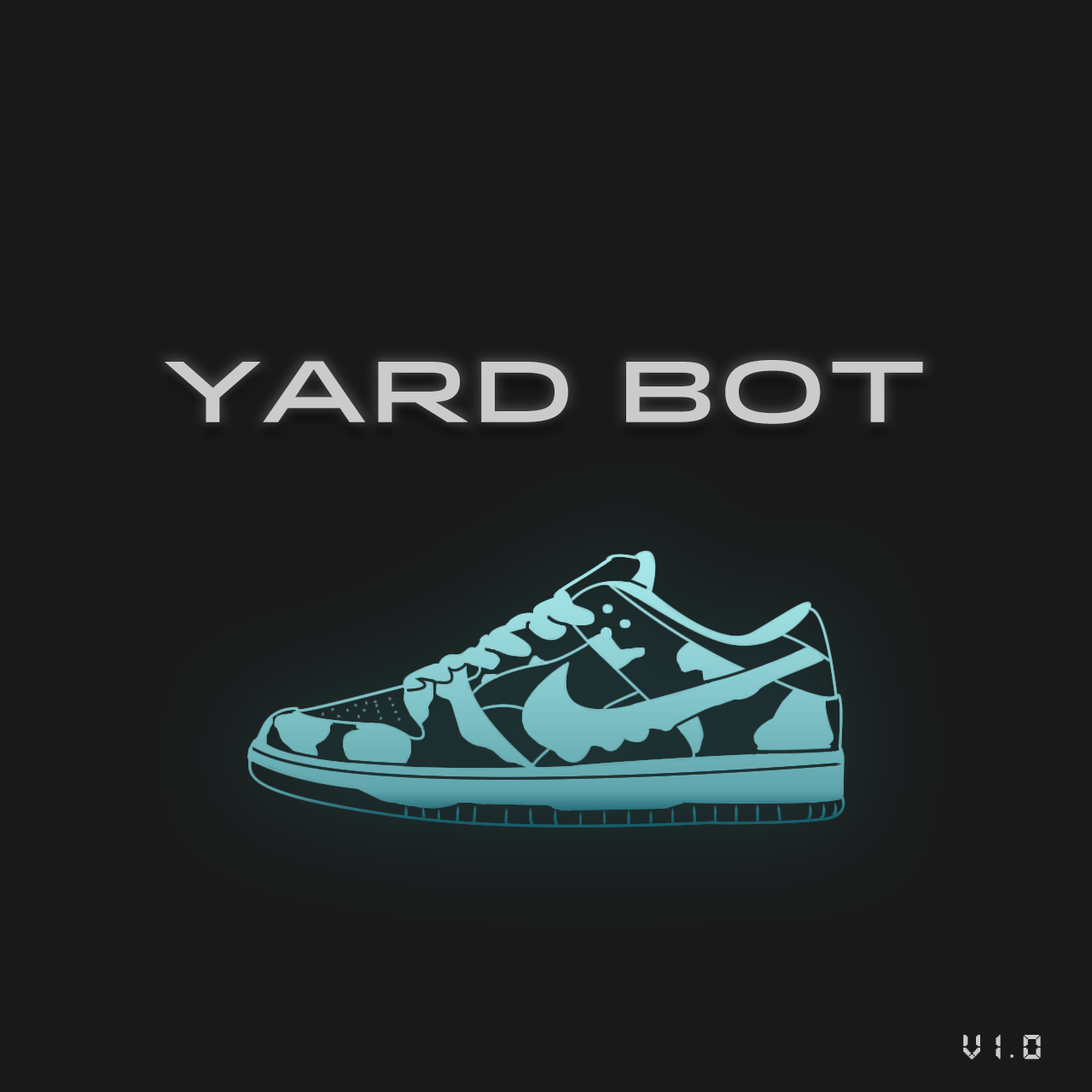
<style>
.page{position:relative;width:1092px;height:1092px;background:#191919}
.page>*{position:absolute;margin:0}
.t1{font:85.8px "Idlewild-Medium";letter-spacing:0.005em;color:#cbcbcb}
.t2{font:28.4px "PixelLCD-7";letter-spacing:0.005em;color:#cbcbcb}
</style>
<div class="page">
<p class="t1" style="left:165px;top:360px;width:758px;height:64px">Yard bot</p>
<p class="t2" style="left:963px;top:1035px;width:78px;height:25px">V1.0</p>
</div>
